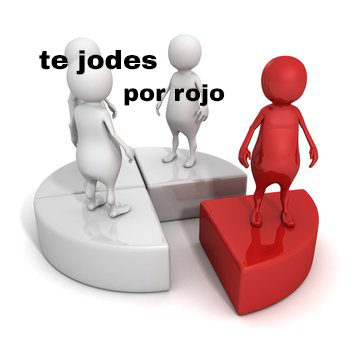
<style>
.page{position:relative;width:360px;height:360px;background:#ffffff}
.page>*{position:absolute;margin:0}
.t1{font:26.1px "ArchivoBlack-Regular";color:#000000;scale:1.04 1}
.t2{font:23.2px "ArchivoBlack-Regular";color:#000000;scale:1.04 1}
</style>
<div class="page">
<p class="t1" style="left:39px;top:50px;width:118px;height:25px">te jodes</p>
<p class="t2" style="left:124px;top:84px;width:101px;height:22px">por rojo</p>
</div>
